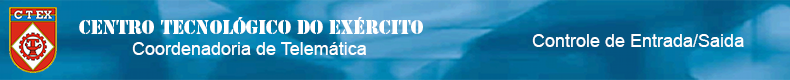
<style>
.page{position:relative;width:790px;height:80px}
.page>*{position:absolute;margin:0}
.t1{font:18px "StencilStd";color:#ffffff}
.t2{font:18px "ArialMT";color:#ffffff}
</style>
<div class="page">
<p class="t1" style="left:79px;top:17px;width:344px;height:17px">Centro Tecnológico do Exército</p>
<p class="t2" style="left:532px;top:34px;width:212px;height:13px">Controle de Entrada/Saida</p>
<p class="t2" style="left:132px;top:42px;width:234px;height:13px">Coordenadoria de Telemática</p>
</div>
